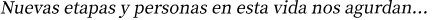
<style>
.page{position:relative;width:435px;height:20px;background:#ffffff}
.page>*{position:absolute;margin:0}
.t1{font:20px "OfficialFateFont-Medium";color:#000000;font-style:italic}
</style>
<div class="page">
<p class="t1" style="left:0px;top:0px;width:427px;height:19px">Nuevas etapas y personas en esta vida nos agurdan...</p>
</div>
